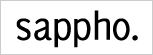
<style>
.page{position:relative;width:153px;height:55px;background:#ffffff}
.page>*{position:absolute;margin:0}
.t1{font:42px "Delicious-Roman";letter-spacing:-0.05em;color:#000000}
.t2{font:42px "Delicious-Roman";letter-spacing:0.005em;color:#000000}
.t3{font:42px "Delicious-Roman";letter-spacing:-0.025em;color:#000000}
.t4{font:42px "Delicious-Roman";color:#000000}
</style>
<div class="page">
<p class="t1" style="left:16px;top:10px;width:122px;height:38px"><span class="t2">s</span><span class="t3">a</span>p<span class="t3">p</span>ho<span class="t4">.</span></p>
</div>
